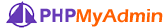
<style>
.page{position:relative;width:165px;height:28px;background:#ffffff}
.page>*{position:absolute;margin:0}
.t1{font:19px "ErasITC-Demi";color:#ff5f00}
</style>
<div class="page">
<p class="t1" style="left:76px;top:9px;width:87px;height:18px">MyAdmin</p>
</div>
